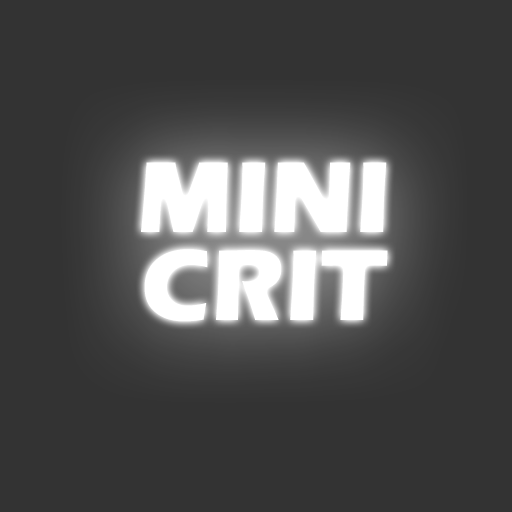
<style>
.page{position:relative;width:512px;height:512px;background:#333333}
.page>*{position:absolute;margin:0}
.t1{font:104.4px/88.4px "ErasITC-Bold";color:#ffffff}
</style>
<div class="page">
<p class="t1" style="left:141px;top:162px;width:247px;height:160px;text-align:center">MINI<br>CRIT</p>
<p class="t1" style="left:141px;top:162px;width:247px;height:160px;text-align:center">MINI<br>CRIT</p>
</div>
